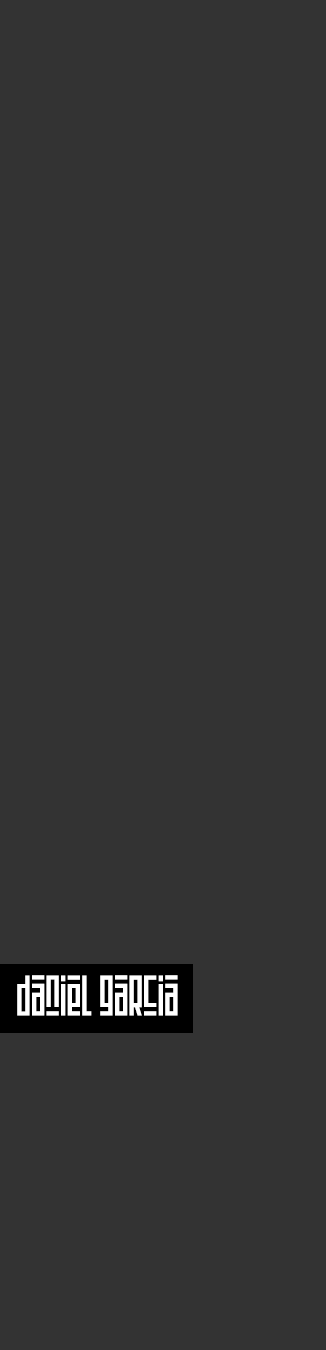
<style>
.page{position:relative;width:326px;height:1350px;background:#333333}
.page>*{position:absolute;margin:0}
.t1{font:62.4px "montsera";letter-spacing:-0.02em;color:#ffffff}
</style>
<div class="page">
<p class="t1" style="left:17px;top:975px;width:161px;height:41px">daniel garcia</p>
</div>
